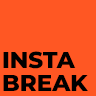
<style>
.page{position:relative;width:96px;height:96px;background:#ff5723}
.page>*{position:absolute;margin:0}
.t1{font:23px/23px "Montserrat-ExtraBold";color:#000000}
</style>
<div class="page">
<p class="t1" style="left:3px;top:51px;width:85px;height:40px">INSTA<br>BREAK</p>
</div>
